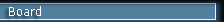
<style>
.page{position:relative;width:224px;height:22px;background:#527f9b}
.page>*{position:absolute;margin:0}
.t1{font:12.1px "Verdana";color:#ffffff;scale:0.91 1}
</style>
<div class="page">
<p class="t1" style="left:9px;top:6px;width:32px;height:10px">Board</p>
</div>
